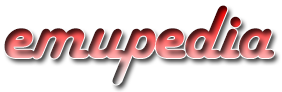
<style>
.page{position:relative;width:282px;height:92px;background:#ffffff}
.page>*{position:absolute;margin:0}
.t1{font:78px "HarlowSolid";letter-spacing:-0.025em}
</style>
<div class="page">
<p class="t1" style="left:4px;top:5px;width:270px;height:80px">emupedia</p>
</div>
